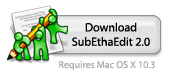
<style>
.page{position:relative;width:172px;height:70px;background:#fefffe}
.page>*{position:absolute;margin:0}
.t1{font:12px "Myriad-Roman";color:#000000}
.t2{font:10px "Myriad-Roman";color:#afafaf}
</style>
<div class="page">
<p class="t1" style="left:72px;top:22px;width:78px;height:24px;text-align:center">Download<br>SubEthaEdit 2.0</p>
<p class="t2" style="left:59px;top:61px;width:96px;height:9px">Requires Mac OS X 10.3</p>
</div>
